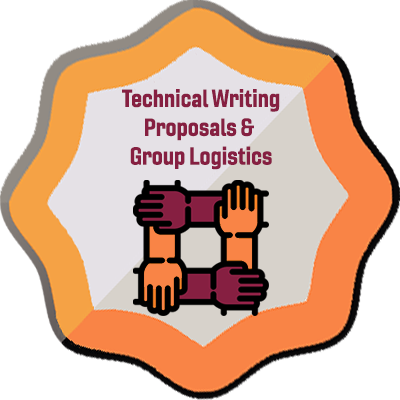
<style>
.page{position:relative;width:400px;height:400px;background:#ffffff}
.page>*{position:absolute;margin:0}
.t1{font:24px "Gineso-ConBol";color:#861f41}
</style>
<div class="page">
<p class="t1" style="left:122px;top:89px;width:158px;height:81px;text-align:center">Technical Writing<br>Proposals &amp; <br>Group Logistics</p>
</div>
